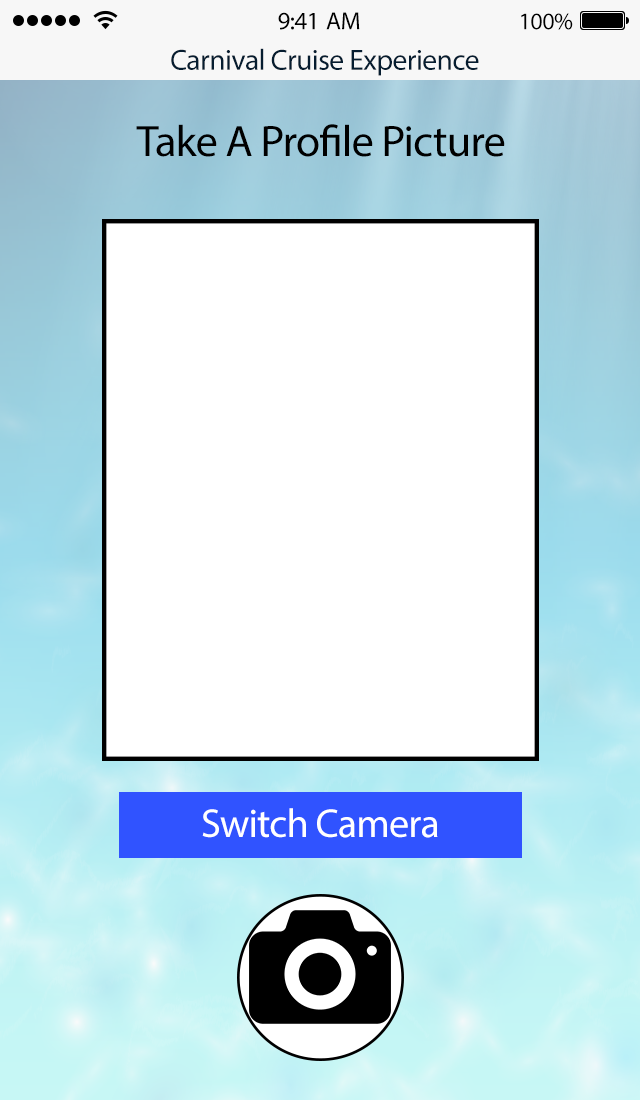
<style>
.page{position:relative;width:640px;height:1100px;background:#ffffff}
.page>*{position:absolute;margin:0}
.t1{font:25px "MyriadPro-Regular";letter-spacing:-0.02em;color:#000000}
.t2{font:24px "MyriadPro-Regular";letter-spacing:-0.02em;color:#000000}
.t3{font:29.4px "MyriadPro-Regular";letter-spacing:-0.02em;color:#061d30}
.t4{font:44.2px "MyriadPro-Regular";letter-spacing:-0.02em;color:#000000}
.t5{font:40.5px "MyriadPro-Regular";letter-spacing:-0.02em;color:#ffffff}
</style>
<div class="page">
<p class="t1" style="left:278px;top:12px;width:82px;height:18px">9:41 AM</p>
<p class="t2" style="left:521px;top:13px;width:52px;height:17px">100%</p>
<p class="t3" style="left:171px;top:48px;width:308px;height:28px">Carnival Cruise Experience</p>
<p class="t4" style="left:136px;top:124px;width:369px;height:33px">Take A Profile Picture</p>
<p class="t5" style="left:202px;top:808px;width:236px;height:30px">Switch Camera</p>
</div>
